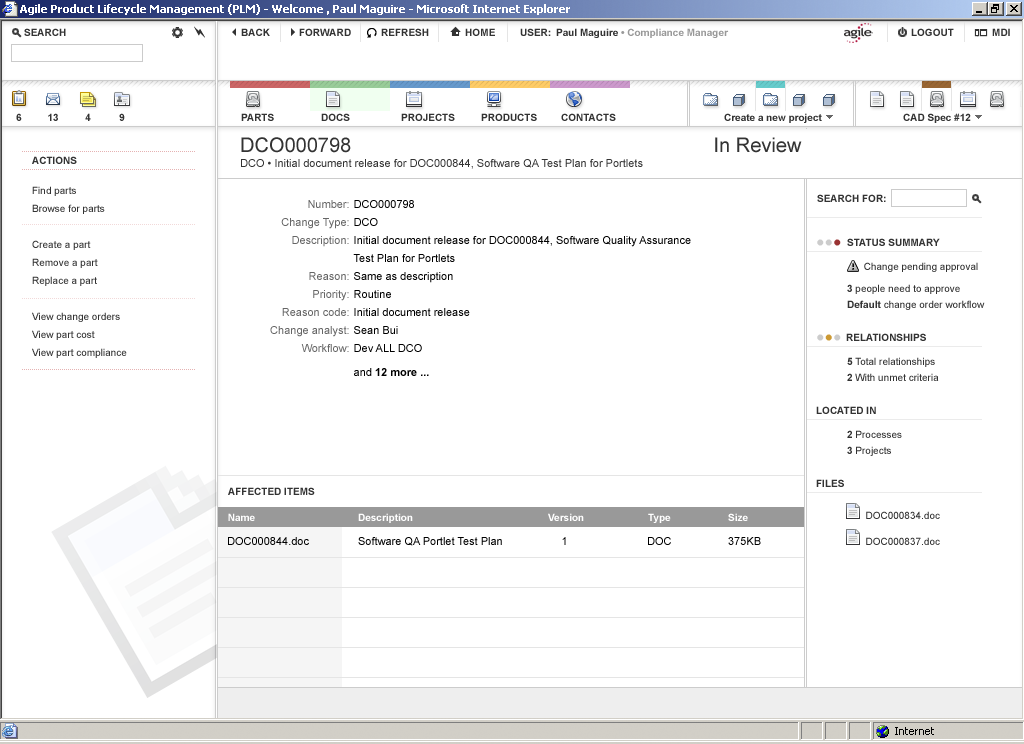
<style>
.page{position:relative;width:1024px;height:744px;background:#ffffff}
.page>*{position:absolute;margin:0}
.t1{font:20px "ArialMT";color:#333333}
.t2{font:10px "Arial-BoldMT";color:#333333}
.t3{font:11px "ArialMT";color:#333333}
.t4{font:10px/18px "ArialMT";color:#333333}
.t5{font:11px/18px "ArialMT";color:#666666}
.t6{font:11px/18px "ArialMT";color:#000000}
.t7{font:11px/18px "Arial-BoldMT";color:#000000}
.t8{font:24px "ArialMT";color:#cccccc}
.t9{font:24px "ArialMT";color:#993333}
.t10{font:10px/16px "ArialMT";color:#333333}
.t11{font:10px/16px "Arial-BoldMT";color:#333333}
.t12{font:24px "ArialMT";color:#cc9933}
.t13{font:10px "Arial-BoldMT";color:#ffffff}
.t14{font:10px/15px "ArialMT";color:#333333}
.t15{font:11px "ArialMT";color:#000000}
</style>
<div class="page">
<p class="t1" style="left:241px;top:137px;width:561px;height:16px">DCO000798           In Review</p>
<p class="t2" style="left:32px;top:156px;width:45px;height:8px">ACTIONS</p>
<p class="t3" style="left:241px;top:159px;width:402px;height:10px">DCO • Initial document release for DOC000844, Software QA Test Plan for Portlets</p>
<p class="t4" style="left:32px;top:186px;width:95px;height:172px">Find parts<br>Browse for parts<br><br>Create a part<br>Remove a part<br>Replace a part<br><br>View change orders<br>View part cost<br>View part compliance</p>
<p class="t2" style="left:817px;top:194px;width:69px;height:8px">SEARCH FOR:</p>
<p class="t5" style="left:270px;top:200px;width:79px;height:152px;text-align:right">Number:<br>Change Type:<br>Description:<br><br>Reason:<br>Priority:<br>Reason code:<br>Change analyst:<br>Workflow:</p>
<p class="t6" style="left:353px;top:200px;width:338px;height:176px">DCO000798<br>DCO<br>Initial document release for DOC000844, Software Quality Assurance<br>Test Plan for Portlets<br>Same as description<br>Routine<br>Initial document release<br>Sean Bui<br>Dev ALL DCO<br>and <span class="t7">12 more ...</span></p>
<p class="t8" style="left:817px;top:239px;width:24px;height:7px">••<span class="t9">•</span></p>
<p class="t2" style="left:847px;top:238px;width:93px;height:8px">STATUS SUMMARY</p>
<p class="t10" style="left:847px;top:262px;width:138px;height:48px">Change pending approval<br><span class="t11">3</span> people need to approve<br><span class="t11">Default </span>change order workflow</p>
<p class="t8" style="left:817px;top:334px;width:24px;height:7px">•<span class="t12">•</span>•</p>
<p class="t2" style="left:846px;top:333px;width:80px;height:8px">RELATIONSHIPS</p>
<p class="t10" style="left:847px;top:357px;width:92px;height:24px"><span class="t11">5</span> Total relationships<br><span class="t11">2</span> With unmet criteria</p>
<p class="t2" style="left:816px;top:406px;width:60px;height:8px">LOCATED IN</p>
<p class="t10" style="left:847px;top:430px;width:55px;height:26px"><span class="t11">2</span> Processes<br><span class="t11">3</span> Projects</p>
<p class="t2" style="left:816px;top:479px;width:28px;height:8px">FILES</p>
<p class="t2" style="left:228px;top:487px;width:87px;height:8px">AFFECTED ITEMS</p>
<p class="t13" style="left:228px;top:513px;width:27px;height:8px">Name</p>
<p class="t13" style="left:358px;top:513px;width:55px;height:10px">Description</p>
<p class="t13" style="left:548px;top:513px;width:36px;height:8px">Version</p>
<p class="t13" style="left:648px;top:513px;width:23px;height:10px">Type</p>
<p class="t13" style="left:728px;top:513px;width:20px;height:8px">Size</p>
<p class="t14" style="left:866px;top:511px;width:74px;height:34px">DOC000834.doc<br>       DOC000837.doc</p>
<p class="t15" style="left:228px;top:537px;width:81px;height:8px">DOC000844.doc</p>
<p class="t15" style="left:358px;top:537px;width:144px;height:9px">Software QA Portlet Test Plan</p>
<p class="t15" style="left:562px;top:537px;width:4px;height:8px">1</p>
<p class="t15" style="left:648px;top:537px;width:23px;height:8px">DOC</p>
<p class="t15" style="left:728px;top:537px;width:33px;height:8px">375KB</p>
</div>
